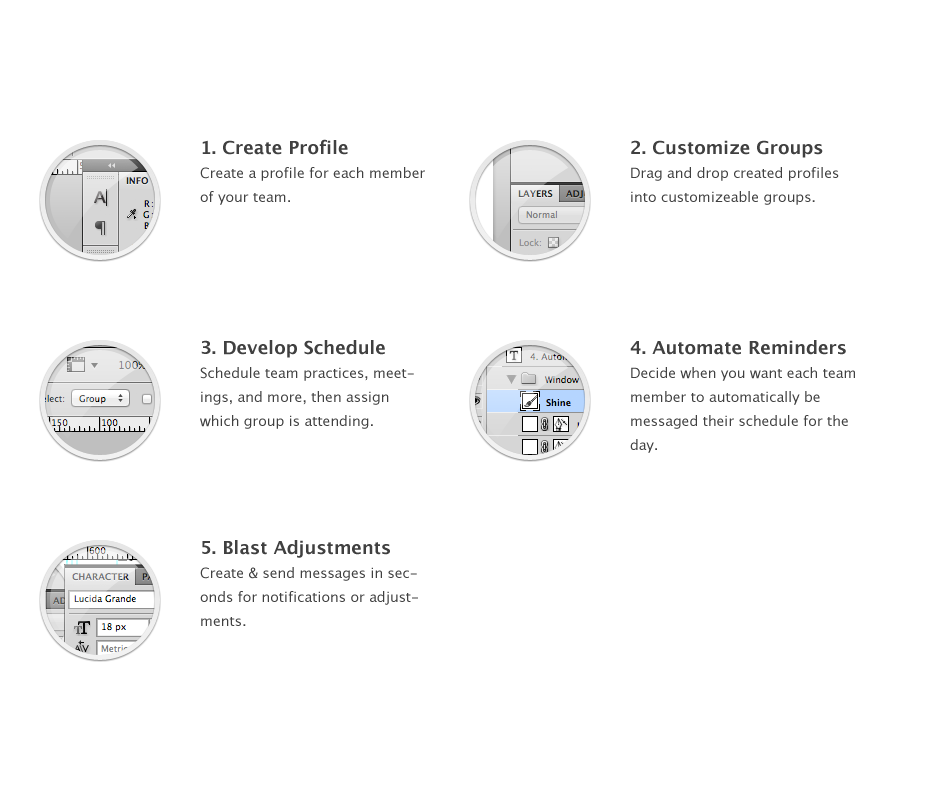
<style>
.page{position:relative;width:940px;height:800px;background:#ffffff}
.page>*{position:absolute;margin:0}
.t1{font:14px/24px "LucidaGrande";color:#404040}
.t2{font:18px/24px "LucidaGrande-Bold";color:#404040}
</style>
<div class="page">
<p class="t1" style="left:200px;top:139px;width:225px;height:66px"><span class="t2">1. Create Profile<br></span>Create a profile for each member of your team.</p>
<p class="t1" style="left:631px;top:140px;width:208px;height:65px"><span class="t2">2. Customize Groups<br></span>Drag and drop created profiles into customizeable groups.</p>
<p class="t1" style="left:200px;top:340px;width:214px;height:89px"><span class="t2">3. Develop Schedule<br></span>Schedule team practices, meetings, and more, then assign which group is attending.</p>
<p class="t1" style="left:630px;top:340px;width:225px;height:113px"><span class="t2">4. Automate Reminders<br></span>Decide when you want each team member to automatically be messaged their schedule for the day.</p>
<p class="t1" style="left:200px;top:540px;width:218px;height:86px"><span class="t2">5. Blast Adjustments<br></span>Create &amp; send messages in seconds for notifications or adjustments.</p>
</div>
